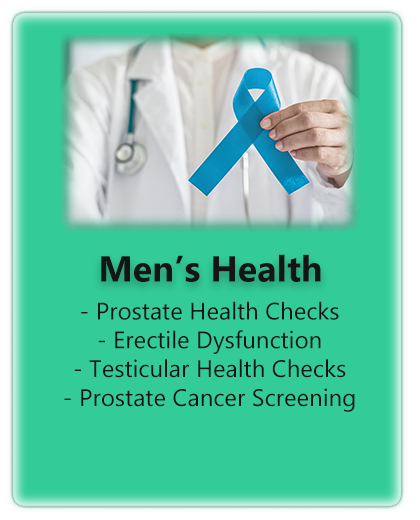
<style>
.page{position:relative;width:420px;height:520px;background:#33cc99}
.page>*{position:absolute;margin:0}
.t1{font:36px "Gadugi-Bold";color:#151515}
.t2{font:24px "Gadugi";color:#151515}
</style>
<div class="page">
<p class="t1" style="left:101px;top:254px;width:220px;height:28px">Men’s Health</p>
<p class="t2" style="left:64px;top:301px;width:291px;height:111px;text-align:center">- Prostate Health Checks<br>- Erectile Dysfunction<br>- Testicular Health Checks<br>- Prostate Cancer Screening</p>
</div>
